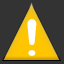
<style>
.page{position:relative;width:64px;height:64px;background:#333333}
.page>*{position:absolute;margin:0}
.t1{font:55px "CourierNewPS-BoldMT";color:#ffffff}
</style>
<div class="page">
<p class="t1" style="left:27px;top:19px;width:10px;height:37px">!</p>
</div>
